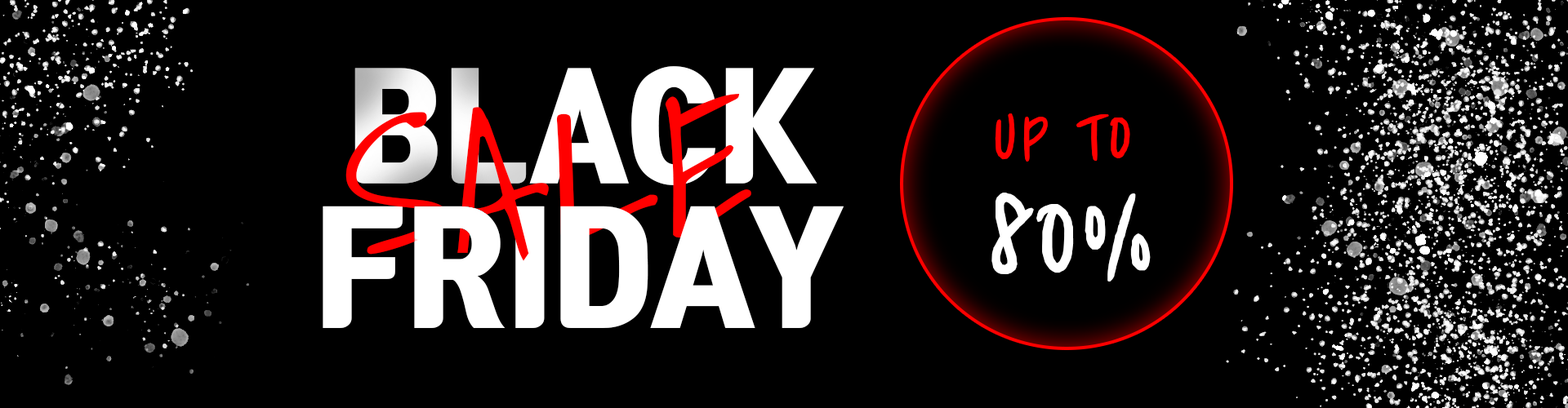
<style>
.page{position:relative;width:1568px;height:408px;background:#000000}
.page>*{position:absolute;margin:0}
.t1{font:133.1px "TmonMonsoriBlack"}
.t2{font:133.1px "TmonMonsoriBlack";color:#ffffff}
.t3{font:200.9px "ShadowsIntoLight";color:#ff0000}
.t4{font:88.2px "Cafe24Shiningstar";color:#ff0000}
.t5{font:161.7px "Cafe24Shiningstar";color:#ffffff}
.t6{font:140.5px "TmonMonsoriBlack";color:#ffffff}
</style>
<div class="page">
<p class="t1" style="left:354px;top:68px;width:173px;height:116px">BL</p>
<p class="t2" style="left:529px;top:66px;width:288px;height:119px">ACK</p>
<p class="t3" style="left:556px;top:94px;width:195px;height:146px">LE</p>
<p class="t3" style="left:345px;top:107px;width:204px;height:154px">SA</p>
<p class="t4" style="left:995px;top:114px;width:135px;height:48px">UP TO</p>
<p class="t5" style="left:991px;top:193px;width:160px;height:89px">80%</p>
<p class="t6" style="left:323px;top:206px;width:222px;height:122px">FRI</p>
<p class="t6" style="left:560px;top:206px;width:284px;height:122px">DAY</p>
</div>
